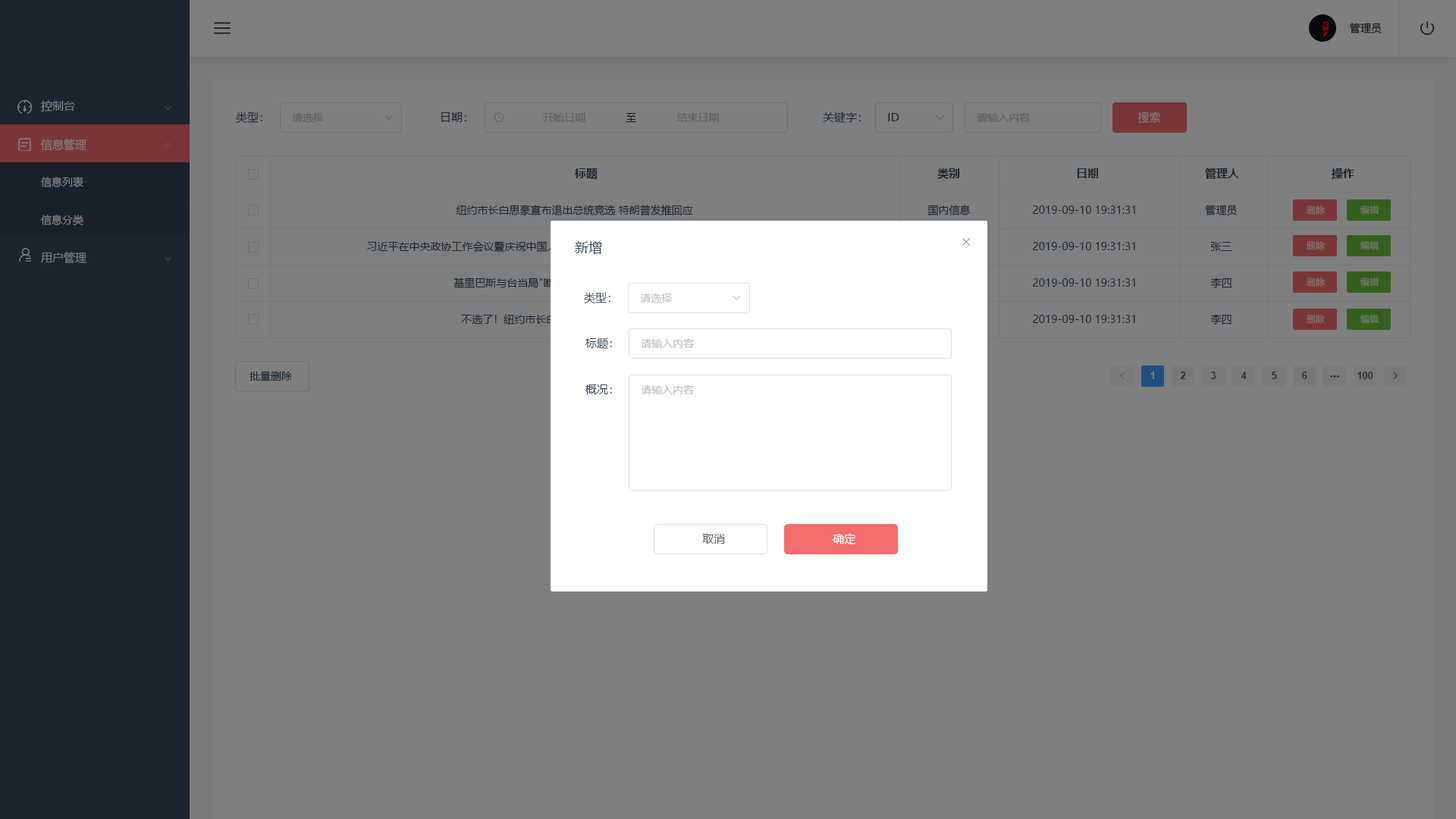
<style>
.page{position:relative;width:1456px;height:819px;background:#7f7f7f}
.page>*{position:absolute;margin:0}
.t1{font:10.6px "MicrosoftYaHei";color:#252525}
.t2{font:11.4px "MicrosoftYaHei";color:#7f7f7f}
.t3{font:11.4px "MicrosoftYaHei";color:#1a252f}
.t4{font:10.6px/37.9px "MicrosoftYaHei";color:#7f7f7f}
.t5{font:11.4px/37.9px "MicrosoftYaHei";color:#7f7f7f}
.t6{font:11.4px "MicrosoftYaHei-Bold";color:#1a252f}
.t7{font:10.6px/36.4px "MicrosoftYaHei";color:#1a252f}
.t8{font:9.1px "MicrosoftYaHei"}
.t9{font:13.6px "MicrosoftYaHei";color:#344a5f}
.t10{font:11.4px "MicrosoftYaHei";color:#344a5f}
.t11{font:10.6px "MicrosoftYaHei";color:#1a252f}
.t12{font:11.4px "MicrosoftYaHei";color:#606266}
.t13{font:11.4px "MicrosoftYaHei";color:#ffffff}
</style>
<div class="page">
<p class="t1" style="left:1350px;top:23px;width:32px;height:11px">管理员</p>
<p class="t2" style="left:41px;top:100px;width:34px;height:12px">控制台</p>
<p class="t3" style="left:236px;top:111px;width:26px;height:12px">类型：</p>
<p class="t3" style="left:441px;top:112px;width:25px;height:10px">日期：</p>
<p class="t3" style="left:823px;top:111px;width:38px;height:12px">关键字：</p>
<p class="t3" style="left:888px;top:113px;width:11px;height:8px">ID</p>
<p class="t2" style="left:1137px;top:111px;width:24px;height:13px">搜索</p>
<p class="t4" style="left:41px;top:139px;width:45px;height:87px"><span class="t5">信息管理<br></span>信息列表<br>信息分类</p>
<p class="t6" style="left:575px;top:168px;width:23px;height:12px">标题</p>
<p class="t6" style="left:937px;top:168px;width:22px;height:11px">类别</p>
<p class="t6" style="left:1077px;top:168px;width:21px;height:11px">日期</p>
<p class="t6" style="left:1205px;top:168px;width:34px;height:11px">管理人</p>
<p class="t6" style="left:1332px;top:168px;width:22px;height:11px">操作</p>
<p class="t7" style="left:1033px;top:206px;width:102px;height:117px">2019-09-10 19:31:31<br>2019-09-10 19:31:31<br>2019-09-10 19:31:31<br>2019-09-10 19:31:31</p>
<p class="t7" style="left:1205px;top:205px;width:32px;height:120px;text-align:center">管理员<br>张三<br>李四<br>李四</p>
<p class="t8" style="left:1307px;top:206px;width:18px;height:9px">删除</p>
<p class="t8" style="left:1360px;top:206px;width:19px;height:9px">编辑</p>
<p class="t9" style="left:575px;top:241px;width:27px;height:13px">新增</p>
<p class="t8" style="left:1307px;top:241px;width:18px;height:9px">删除</p>
<p class="t8" style="left:1360px;top:241px;width:19px;height:9px">编辑</p>
<p class="t2" style="left:41px;top:252px;width:45px;height:11px">用户管理</p>
<p class="t8" style="left:1307px;top:278px;width:18px;height:9px">删除</p>
<p class="t8" style="left:1360px;top:278px;width:19px;height:9px">编辑</p>
<p class="t10" style="left:584px;top:292px;width:26px;height:11px">类型：</p>
<p class="t8" style="left:1307px;top:315px;width:18px;height:9px">删除</p>
<p class="t8" style="left:1360px;top:315px;width:19px;height:9px">编辑</p>
<p class="t10" style="left:585px;top:338px;width:27px;height:11px">标题：</p>
<p class="t11" style="left:249px;top:371px;width:43px;height:10px">批量删除</p>
<p class="t10" style="left:585px;top:384px;width:27px;height:10px">概况：</p>
<p class="t12" style="left:702px;top:534px;width:23px;height:10px">取消</p>
<p class="t13" style="left:833px;top:533px;width:22px;height:11px">确定</p>
</div>
